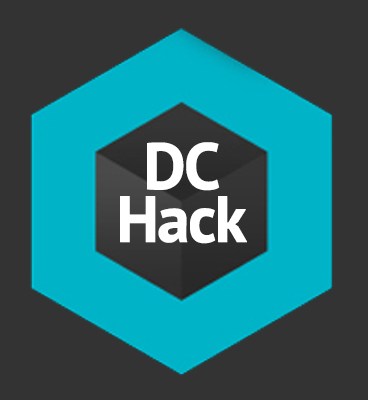
<style>
.page{position:relative;width:368px;height:400px;background:#333333}
.page>*{position:absolute;margin:0}
.t1{font:65px/53px "PTSans-Bold";letter-spacing:-0.05em;color:#ffffff;font-weight:bold}
</style>
<div class="page">
<p class="t1" style="left:120px;top:142px;width:127px;height:102px;text-align:center">DC<br>Hack</p>
</div>
